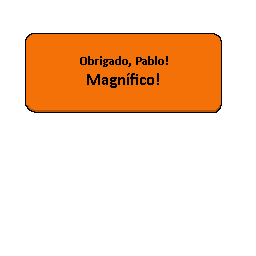
<style>
.page{position:relative;width:256px;height:256px;background:#ffffff}
.page>*{position:absolute;margin:0}
.t1{font:12.5px "Calibri-Bold";color:#000000}
.t2{font:16.7px "Calibri-Bold";color:#000000}
</style>
<div class="page">
<p class="t1" style="left:80px;top:56px;width:88px;height:32px;text-align:center">Obrigado, Pablo!<br><span class="t2">Magnífico!</span></p>
</div>
